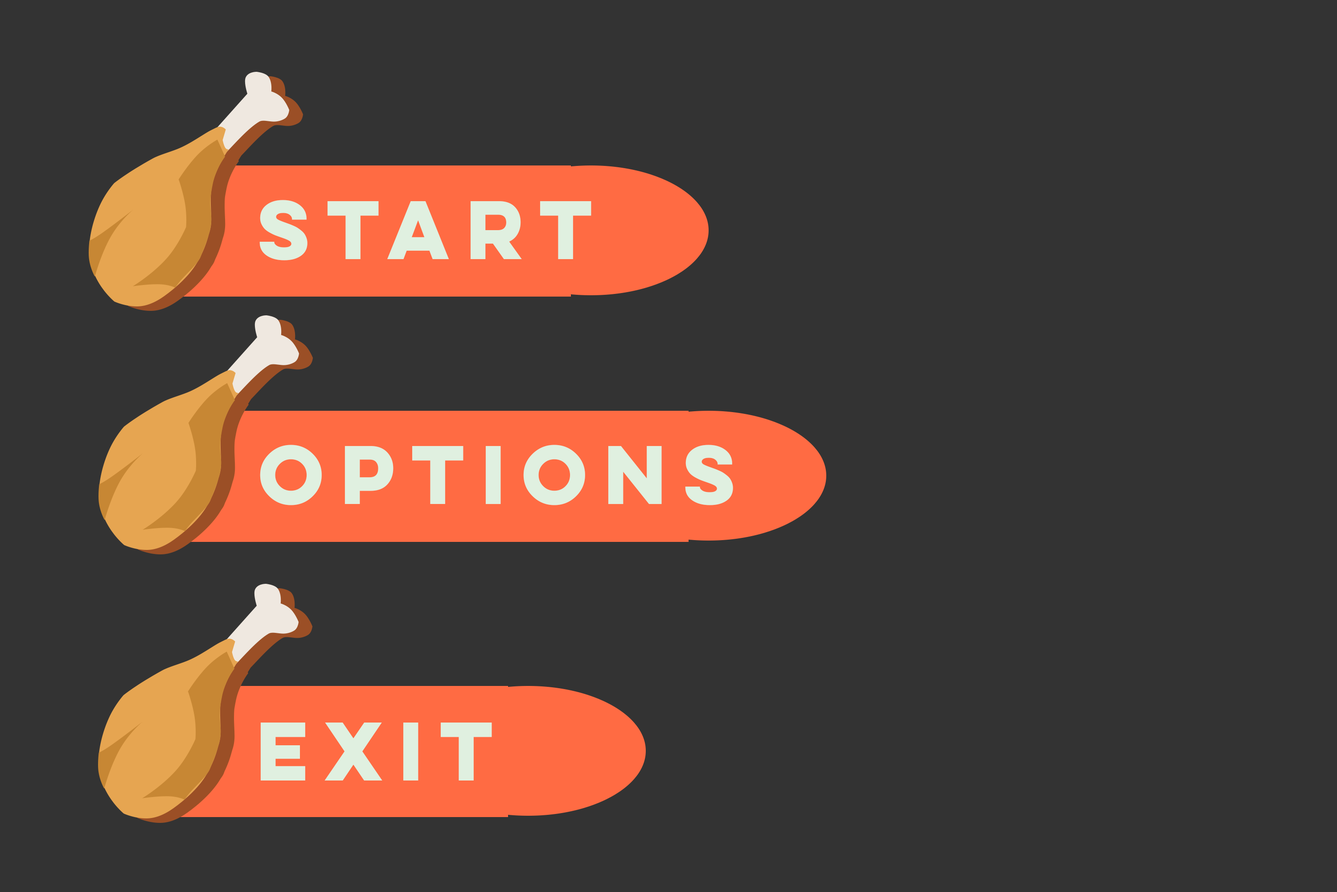
<style>
.page{position:relative;width:1337px;height:892px;background:#333333}
.page>*{position:absolute;margin:0}
.t1{font:74.3px "LuloCleanOne-Bold";color:#e0f0e0}
</style>
<div class="page">
<p class="t1" style="left:259px;top:200px;width:333px;height:60px">START</p>
<p class="t1" style="left:260px;top:444px;width:473px;height:61px">options</p>
<p class="t1" style="left:260px;top:722px;width:232px;height:58px">exit</p>
</div>
